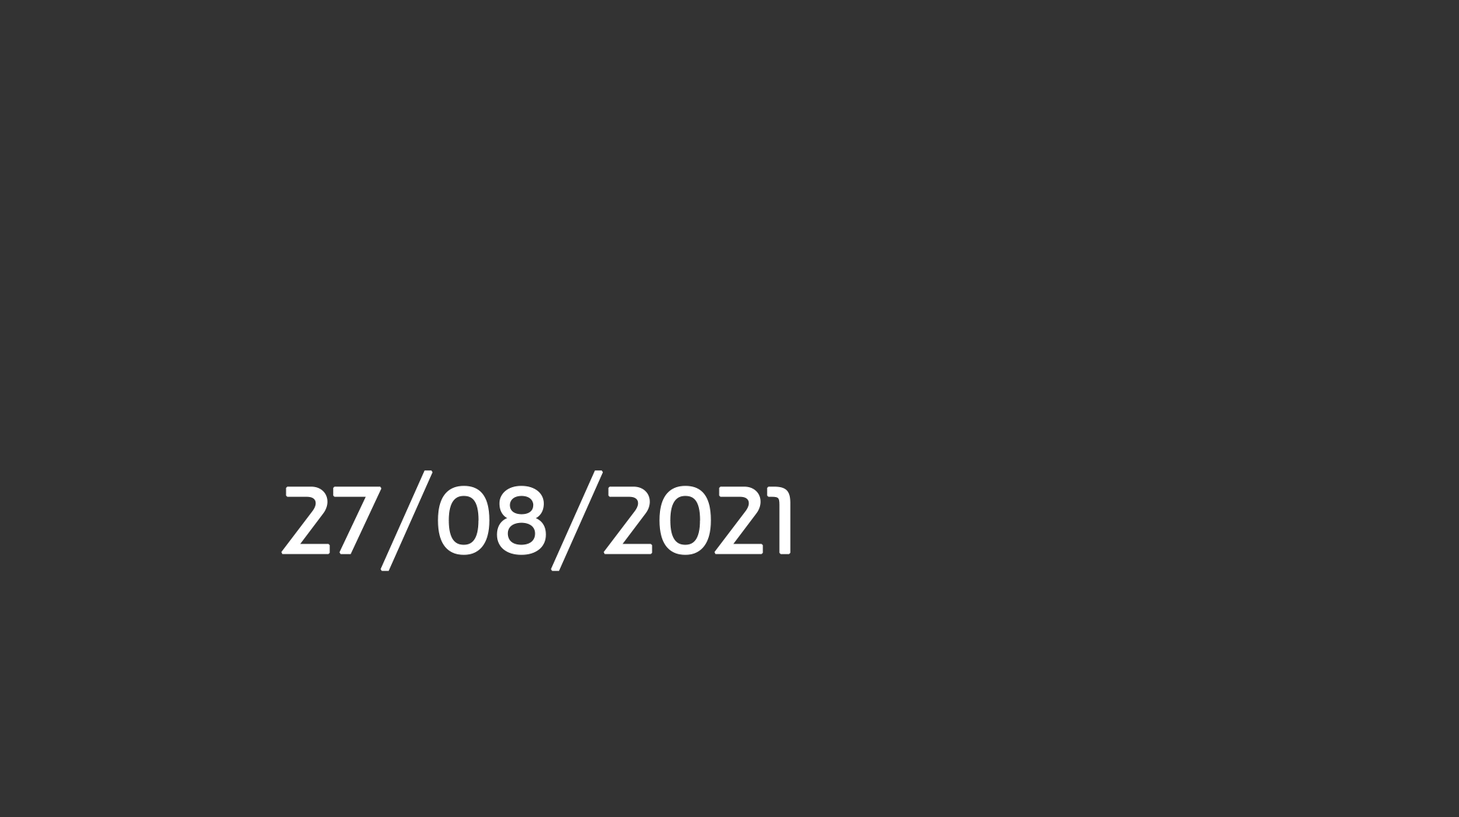
<style>
.page{position:relative;width:1459px;height:817px;background:#333333}
.page>*{position:absolute;margin:0}
.t1{font:91.7px "Rondana-Regular";color:#ffffff;font-weight:bold}
</style>
<div class="page">
<p class="t1" style="left:281px;top:471px;width:510px;height:100px">27/08/2021</p>
</div>
